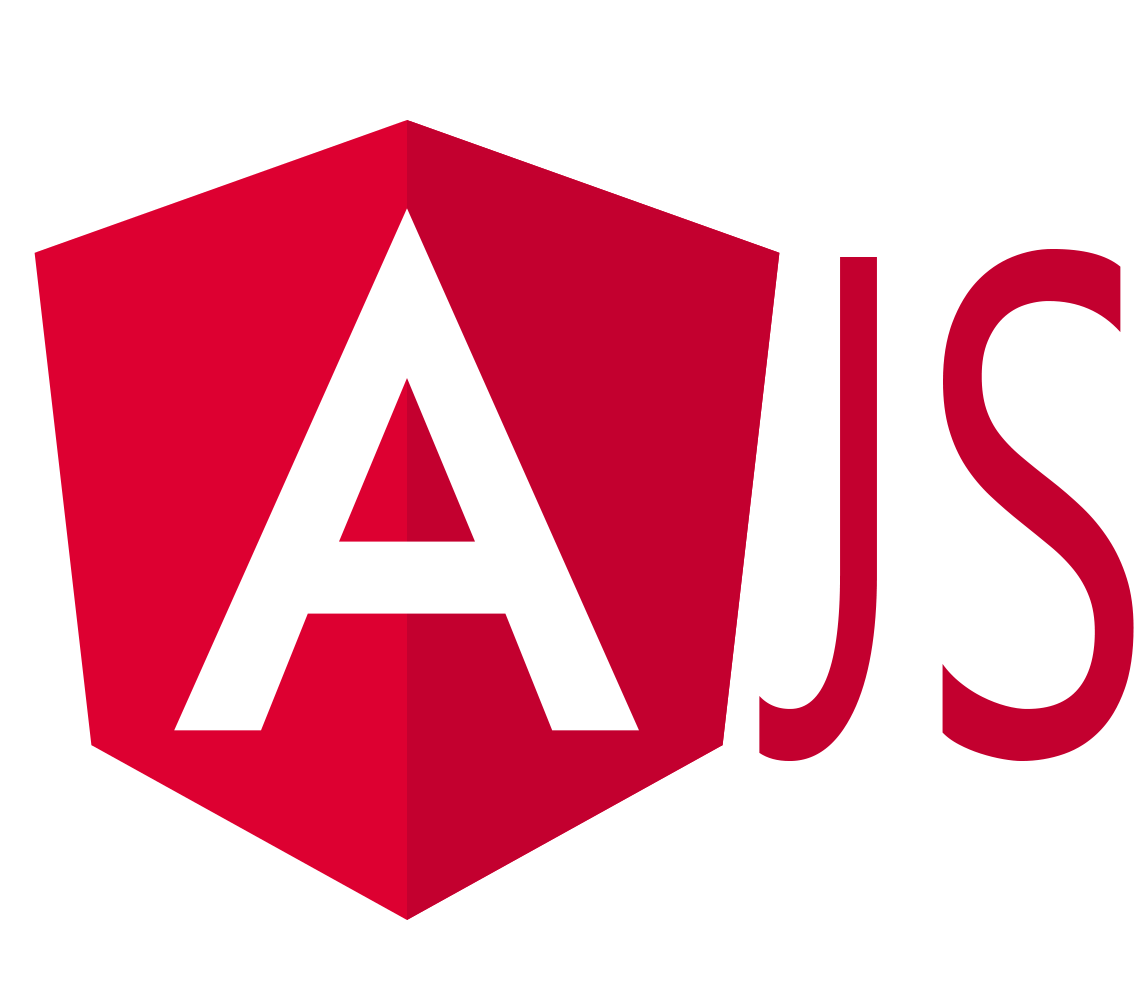
<style>
.page{position:relative;width:1134px;height:1000px;background:#ffffff}
.page>*{position:absolute;margin:0}
.t1{font:707.8px "NirmalaUI";color:#c3002f;scale:0.64 1}
</style>
<div class="page">
<p class="t1" style="left:759px;top:249px;width:375px;height:512px">JS</p>
</div>
